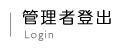
<style>
.page{position:relative;width:120px;height:50px;background:#ffffff}
.page>*{position:absolute;margin:0}
.t1{font:16px "DFYuan-Lt-HK-BF";letter-spacing:0.12em;color:#000000;font-weight:bold}
.t2{font:11px "Humanist521BT-Light";letter-spacing:0.12em;color:#707070;font-weight:bold}
</style>
<div class="page">
<p class="t1" style="left:22px;top:9px;width:89px;height:16px">管理者登出</p>
<p class="t2" style="left:25px;top:30px;width:28px;height:11px">Login</p>
</div>
